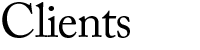
<style>
.page{position:relative;width:200px;height:50px;background:#ffffff}
.page>*{position:absolute;margin:0}
.t1{font:48px "ACaslonPro-Regular";letter-spacing:-0.025em;color:#000000}
</style>
<div class="page">
<p class="t1" style="left:2px;top:2px;width:128px;height:36px">Clients</p>
</div>
